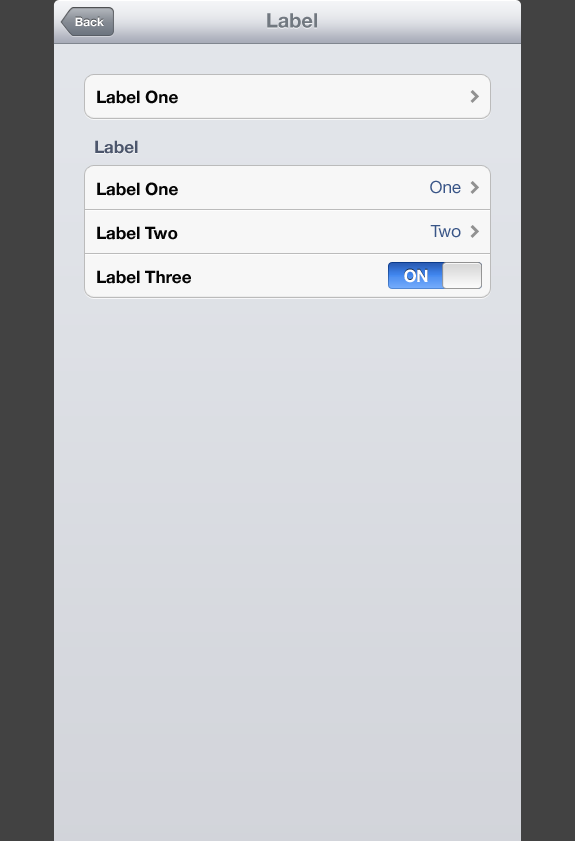
<style>
.page{position:relative;width:575px;height:841px}
.page>*{position:absolute;margin:0}
.t1{font:12px "HelveticaNeue-Bold";color:#ffffff}
.t2{font:20px "HelveticaNeue-Bold";color:#717880}
.t3{font:17px "HelveticaNeue-Bold";color:#040404}
.t4{font:17px "HelveticaNeue-Bold";color:#4c566c}
.t5{font:17px/44px "HelveticaNeue-Bold";color:#040404}
.t6{font:17px/44px "HelveticaNeue";color:#395587}
.t7{font:17px "HelveticaNeue-Bold";letter-spacing:-0.04em;color:#ffffff}
</style>
<div class="page">
<p class="t1" style="left:75px;top:17px;width:29px;height:10px">Back</p>
<p class="t2" style="left:267px;top:13px;width:50px;height:15px">Label</p>
<p class="t3" style="left:97px;top:90px;width:81px;height:14px">Label One</p>
<p class="t4" style="left:95px;top:140px;width:43px;height:14px">Label</p>
<p class="t5" style="left:97px;top:182px;width:94px;height:102px">Label One<br>Label Two<br>Label Three</p>
<p class="t6" style="left:430px;top:180px;width:31px;height:58px;text-align:right">One<br>Two</p>
<p class="t7" style="left:404px;top:269px;width:24px;height:14px">ON</p>
</div>
